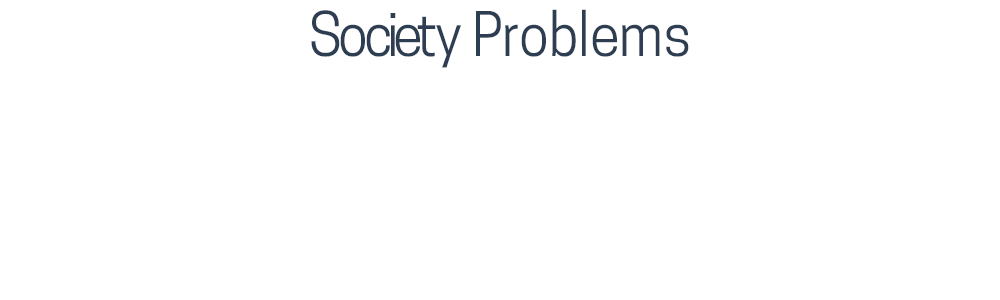
<style>
.page{position:relative;width:1000px;height:300px;background:#ffffff}
.page>*{position:absolute;margin:0}
.t1{font:57.8px "CooperHewitt-Book";color:#2d3e52;scale:0.94 1}
</style>
<div class="page">
<p class="t1" style="left:311px;top:9px;width:378px;height:59px">Society Problems</p>
</div>
